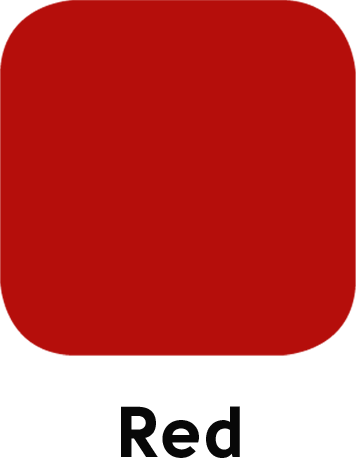
<style>
.page{position:relative;width:356px;height:458px;background:#b50e0b}
.page>*{position:absolute;margin:0}
.t1{font:72px "Solomon-Sans-Bold";color:#080808}
</style>
<div class="page">
<p class="t1" style="left:121px;top:406px;width:119px;height:52px">Red</p>
</div>
